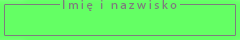
<style>
.page{position:relative;width:240px;height:40px;background:#64ff64}
.page>*{position:absolute;margin:0}
.t1{font:12.5px "MyriadPro-Regular";letter-spacing:0.2em;color:#7c7c7c}
</style>
<div class="page">
<p class="t1" style="left:63px;top:0px;width:114px;height:11px">Imię i nazwisko</p>
</div>
